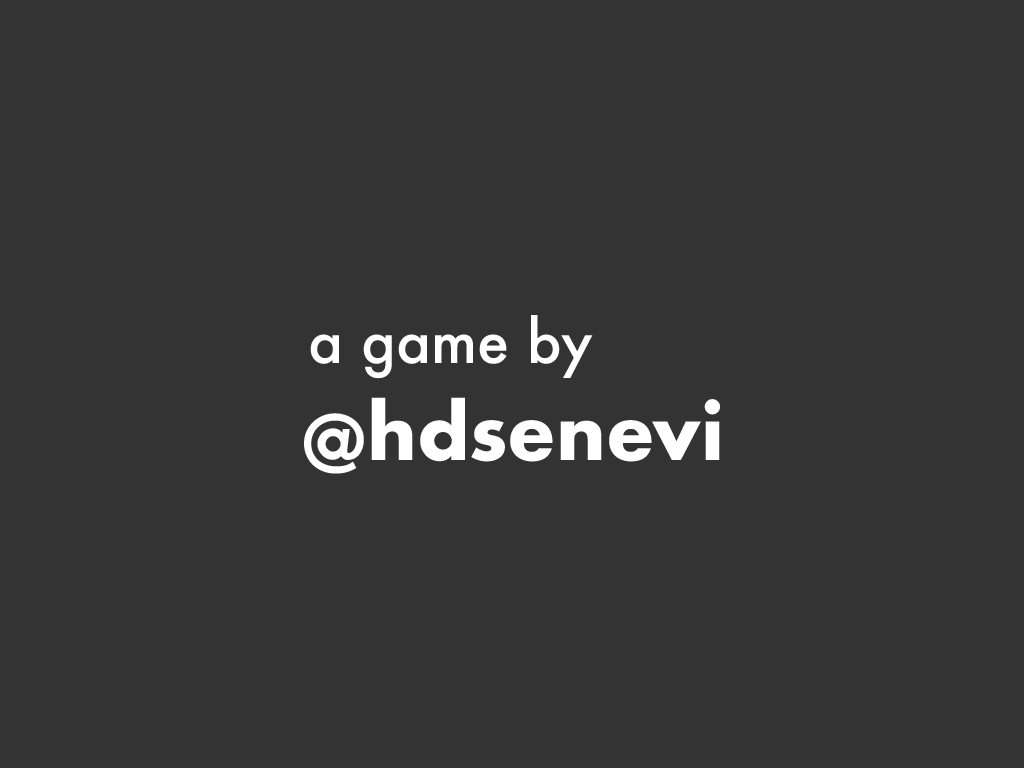
<style>
.page{position:relative;width:1024px;height:768px;background:#333333}
.page>*{position:absolute;margin:0}
.t1{font:58.3px "Futura-Medium";color:#ffffff}
.t2{font:75px "Futura-Bold";color:#ffffff}
</style>
<div class="page">
<p class="t1" style="left:310px;top:315px;width:283px;height:64px">a game by</p>
<p class="t2" style="left:304px;top:397px;width:416px;height:77px">@hdsenevi</p>
</div>
